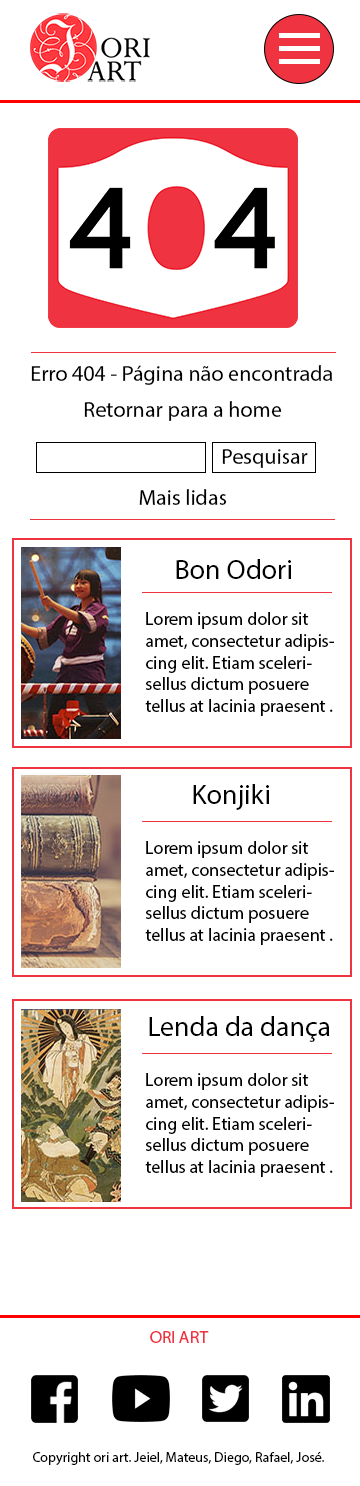
<style>
.page{position:relative;width:360px;height:1486px;background:#ffffff}
.page>*{position:absolute;margin:0}
.t1{font:22px "MyriadPro-Regular";color:#000000}
.t2{font:28px "MyriadPro-Regular";color:#000000}
.t3{font:18px "MyriadPro-Regular";color:#000000}
</style>
<div class="page">
<p class="t1" style="left:31px;top:365px;width:302px;height:20px">Erro 404 - Página não encontrada</p>
<p class="t1" style="left:84px;top:401px;width:198px;height:20px">Retornar para a home</p>
<p class="t1" style="left:139px;top:489px;width:88px;height:16px">Mais lidas</p>
<p class="t2" style="left:176px;top:559px;width:115px;height:20px">Bon Odori</p>
<p class="t3" style="left:145px;top:612px;width:189px;height:104px">Lorem ipsum dolor sit amet, consectetur adipiscing elit. Etiam scelerisellus dictum posuere tellus at lacinia praesent .</p>
<p class="t2" style="left:193px;top:784px;width:76px;height:26px">Konjiki</p>
<p class="t3" style="left:145px;top:841px;width:189px;height:104px">Lorem ipsum dolor sit amet, consectetur adipiscing elit. Etiam scelerisellus dictum posuere tellus at lacinia praesent .</p>
<p class="t2" style="left:149px;top:1016px;width:181px;height:26px">Lenda da dança</p>
<p class="t3" style="left:145px;top:1073px;width:189px;height:104px">Lorem ipsum dolor sit amet, consectetur adipiscing elit. Etiam scelerisellus dictum posuere tellus at lacinia praesent .</p>
</div>
